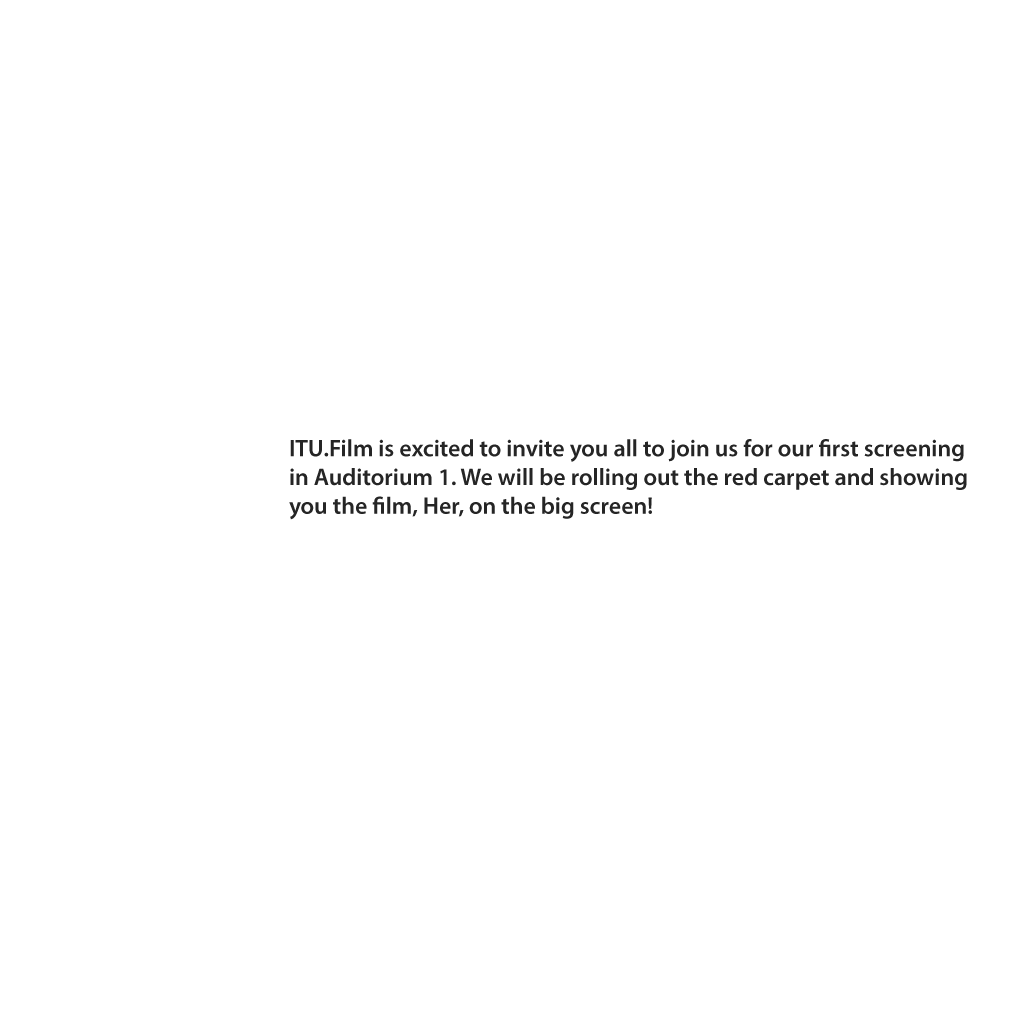
<style>
.page{position:relative;width:1020px;height:1020px;background:#ffffff}
.page>*{position:absolute;margin:0}
.t1{font:24px "MyriadPro-Semibold";color:#252525}
</style>
<div class="page">
<p class="t1" style="left:289px;top:439px;width:678px;height:81px">ITU.Film is excited to invite you all to join us for our first screening<br>in Auditorium 1. We will be rolling out the red carpet and showing<br>you the film, Her, on the big screen!</p>
</div>
